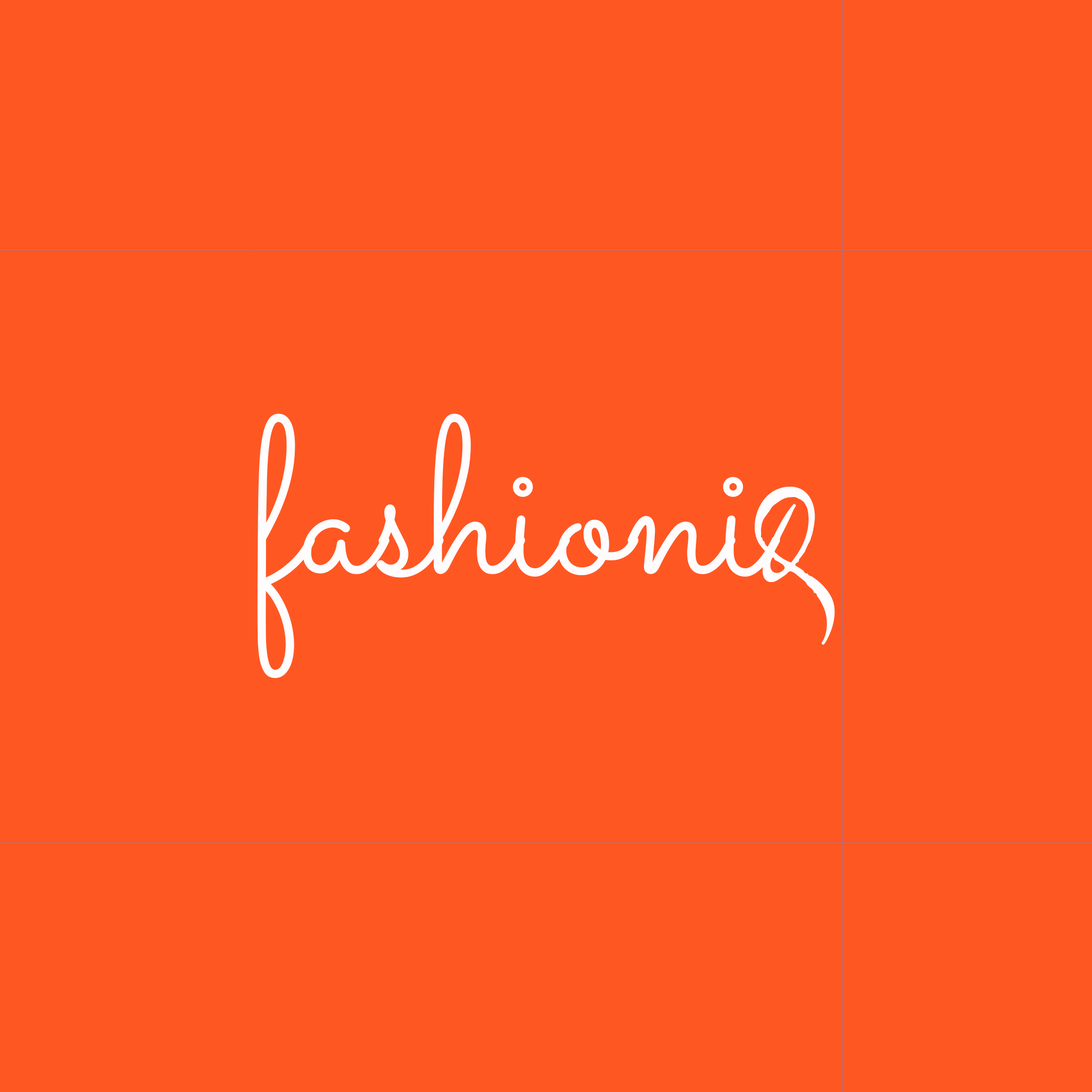
<style>
.page{position:relative;width:1092px;height:1092px;background:#ff5722}
.page>*{position:absolute;margin:0}
.t1{font:222.6px "Sacramento-Regular";letter-spacing:-0.01em;color:#fffcfd}
.t2{font:247.3px "ExPonto-Regular";letter-spacing:-0.01em;color:#fffcfd}
</style>
<div class="page">
<p class="t1" style="left:257px;top:413px;width:523px;height:265px">fashioni</p>
<p class="t2" style="left:755px;top:487px;width:80px;height:158px">q</p>
</div>
